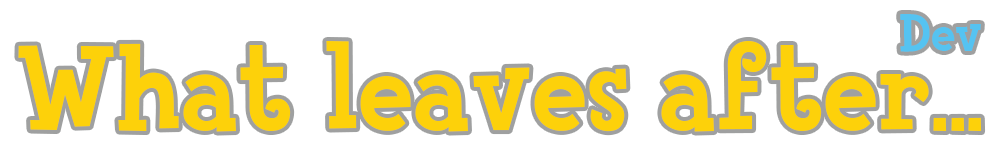
<style>
.page{position:relative;width:1000px;height:168px;background:#ffffff}
.page>*{position:absolute;margin:0}
.t1{font:54.4px "FinkHeavy";color:#55c3f1}
.t2{font:123px "FinkHeavy";color:#fdd10a}
</style>
<div class="page">
<p class="t1" style="left:900px;top:14px;width:81px;height:38px">Dev</p>
<p class="t2" style="left:18px;top:41px;width:964px;height:91px">What leaves after...</p>
</div>
